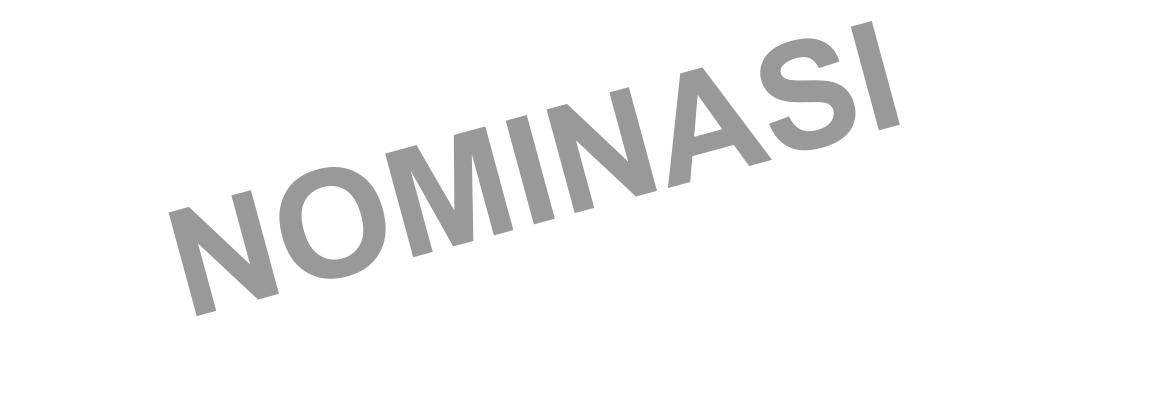
<style>
.page{position:relative;width:1164px;height:400px;background:#ffffff}
.page>*{position:absolute;margin:0}
.t1{font:150px "Arial-BoldMT";color:#999999}
</style>
<div class="page">
<p class="t1" style="left:168px;top:21px;width:732px;height:295px;rotate:-15deg">NOMINASI</p>
</div>
